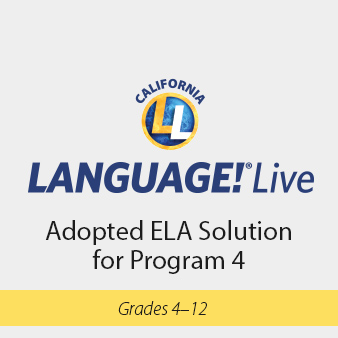
<style>
.page{position:relative;width:338px;height:338px;background:#eeeeee}
.page>*{position:absolute;margin:0}
.t1{font:27px/29px "MyriadPro-Regular";color:#1c1c1c}
.t2{font:19px "MyriadPro-LightIt";color:#1c1c1c}
</style>
<div class="page">
<p class="t1" style="left:45px;top:220px;width:246px;height:54px;text-align:center">Adopted ELA Solution<br>for Program 4</p>
<p class="t2" style="left:118px;top:301px;width:89px;height:14px">Grades 4–12</p>
</div>
